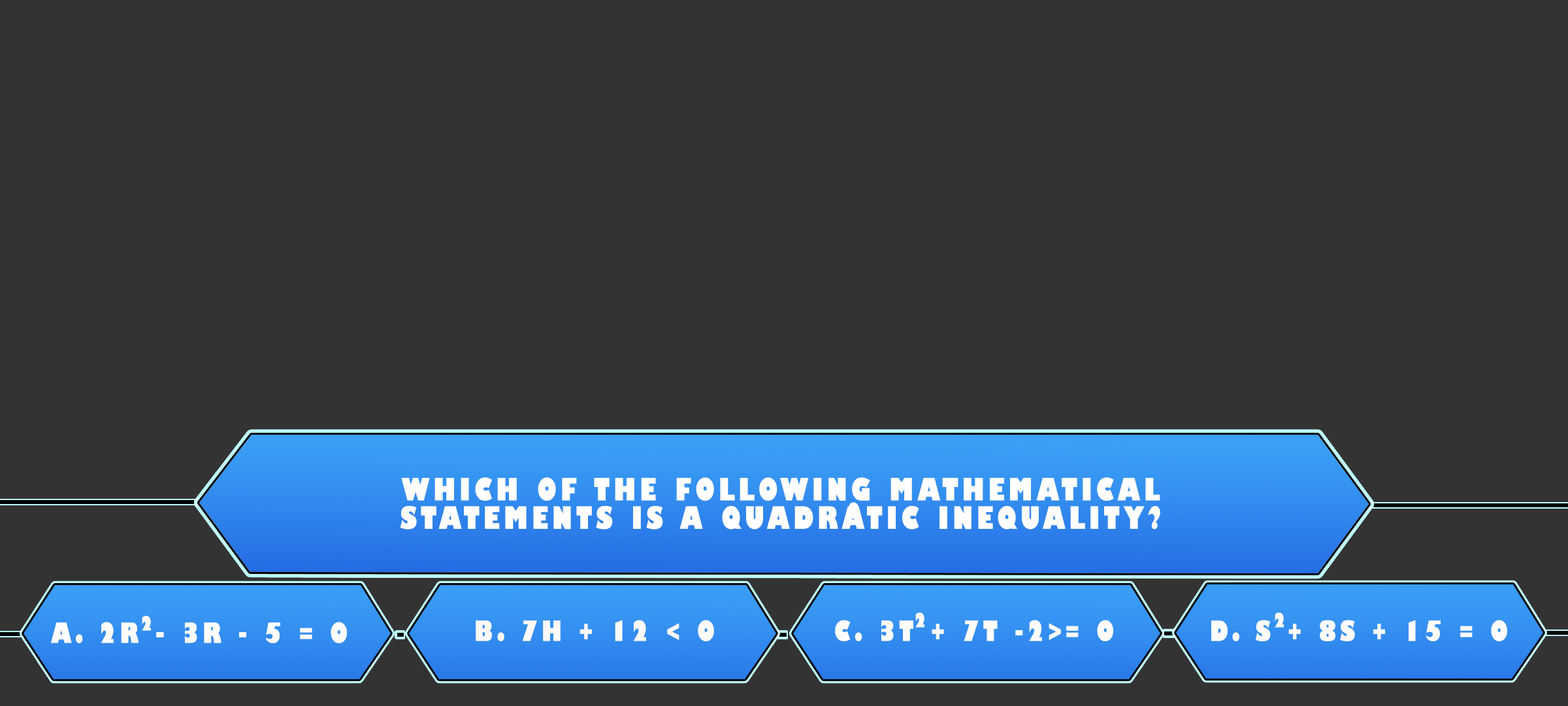
<style>
.page{position:relative;width:1568px;height:706px;background:#333333}
.page>*{position:absolute;margin:0}
.t1{font:30px/28.4px "GillSans-UltraBoldCondensed";letter-spacing:0.115em;color:#ffffff;text-transform:uppercase;scale:1.12 1}
.t2{font:21.1px "GillSans-UltraBoldCondensed";letter-spacing:0.115em;color:#ffffff;text-transform:uppercase;scale:1.11 1}
.t3{font:19.1px "GillSans-UltraBoldCondensed";letter-spacing:0.115em;color:#fdfdfd;text-transform:uppercase;scale:1.12 1}
.t4{font:27.2px "GillSans-UltraBoldCondensed";letter-spacing:0.115em;color:#fdfdfd;text-transform:uppercase;scale:1.12 1}
.t5{font:27.2px "GillSans-UltraBoldCondensed";letter-spacing:0.115em;color:#fcf9f9;text-transform:uppercase;scale:1.12 1}
.t6{font:27.2px "GillSans-UltraBoldCondensed";letter-spacing:0.115em;color:#fdfcfc;text-transform:uppercase;scale:1.12 1}
.t7{font:27.2px "GillSans-UltraBoldCondensed";letter-spacing:0.115em;color:#fffdfd;text-transform:uppercase;scale:1.12 1}
</style>
<div class="page">
<p class="t1" style="left:400px;top:477px;width:760px;height:52px;text-align:center">Which of the following mathematical<br>statements is a quadratic inequality?</p>
<p class="t2" style="left:849px;top:502px;width:10px;height:17px">2</p>
<p class="t3" style="left:142px;top:615px;width:9px;height:15px">2</p>
<p class="t3" style="left:915px;top:612px;width:9px;height:15px">2</p>
<p class="t3" style="left:1275px;top:612px;width:9px;height:15px">2</p>
<p class="t4" style="left:51px;top:621px;width:296px;height:22px">A. 2r - 3r - 5 = 0</p>
<p class="t5" style="left:476px;top:619px;width:238px;height:22px">B. 7h + 12 &lt; 0</p>
<p class="t6" style="left:835px;top:619px;width:278px;height:22px">C. 3t + 7t -2&gt;= 0</p>
<p class="t7" style="left:1211px;top:619px;width:296px;height:22px">D. s + 8s + 15 = 0</p>
</div>
